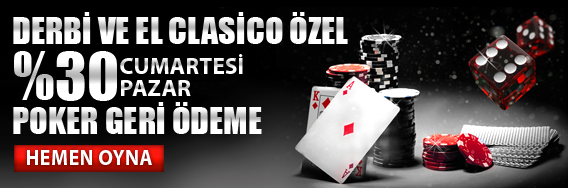
<style>
.page{position:relative;width:568px;height:188px}
.page>*{position:absolute;margin:0}
.t1{font:34px "Impact";color:#ffffff;text-transform:uppercase}
.t2{font:60.8px "Impact";color:#ffffff;text-transform:uppercase}
.t3{font:23.6px "MyriadPro-Bold";color:#f6f6f6;text-transform:uppercase}
.t4{font:23.6px "MyriadPro-Bold";color:#ffffff;text-transform:uppercase}
.t5{font:22px "MyriadPro-Bold";letter-spacing:0.025em;color:#ffffff;text-transform:uppercase;scale:0.91 1}
</style>
<div class="page">
<p class="t1" style="left:13px;top:12px;width:335px;height:32px">derbİ ve el Clasİco özel</p>
<p class="t2" style="left:14px;top:51px;width:103px;height:50px">%30</p>
<p class="t3" style="left:120px;top:54px;width:123px;height:20px">cumartesİ</p>
<p class="t4" style="left:121px;top:80px;width:70px;height:16px">Pazar</p>
<p class="t1" style="left:13px;top:102px;width:249px;height:32px">POKER gerİ ödeme</p>
<p class="t5" style="left:27px;top:150px;width:125px;height:15px">HEMEN OYNA</p>
</div>
